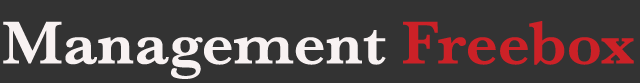
<style>
.page{position:relative;width:640px;height:83px;background:#333333}
.page>*{position:absolute;margin:0}
.t1{font:63px "Baskerville-SemiBold";color:#f8f2f2}
.t2{font:63px "Baskerville-SemiBold";color:#cc2127}
</style>
<div class="page">
<p class="t1" style="left:3px;top:21px;width:631px;height:58px">Management <span class="t2">Freebox</span></p>
</div>
